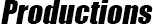
<style>
.page{position:relative;width:153px;height:24px;background:#000000}
.page>*{position:absolute;margin:0}
.t1{font:30.3px "Impact";color:#000000;font-style:italic}
</style>
<div class="page">
<p class="t1" style="left:1px;top:0px;width:152px;height:24px">Productions</p>
</div>
